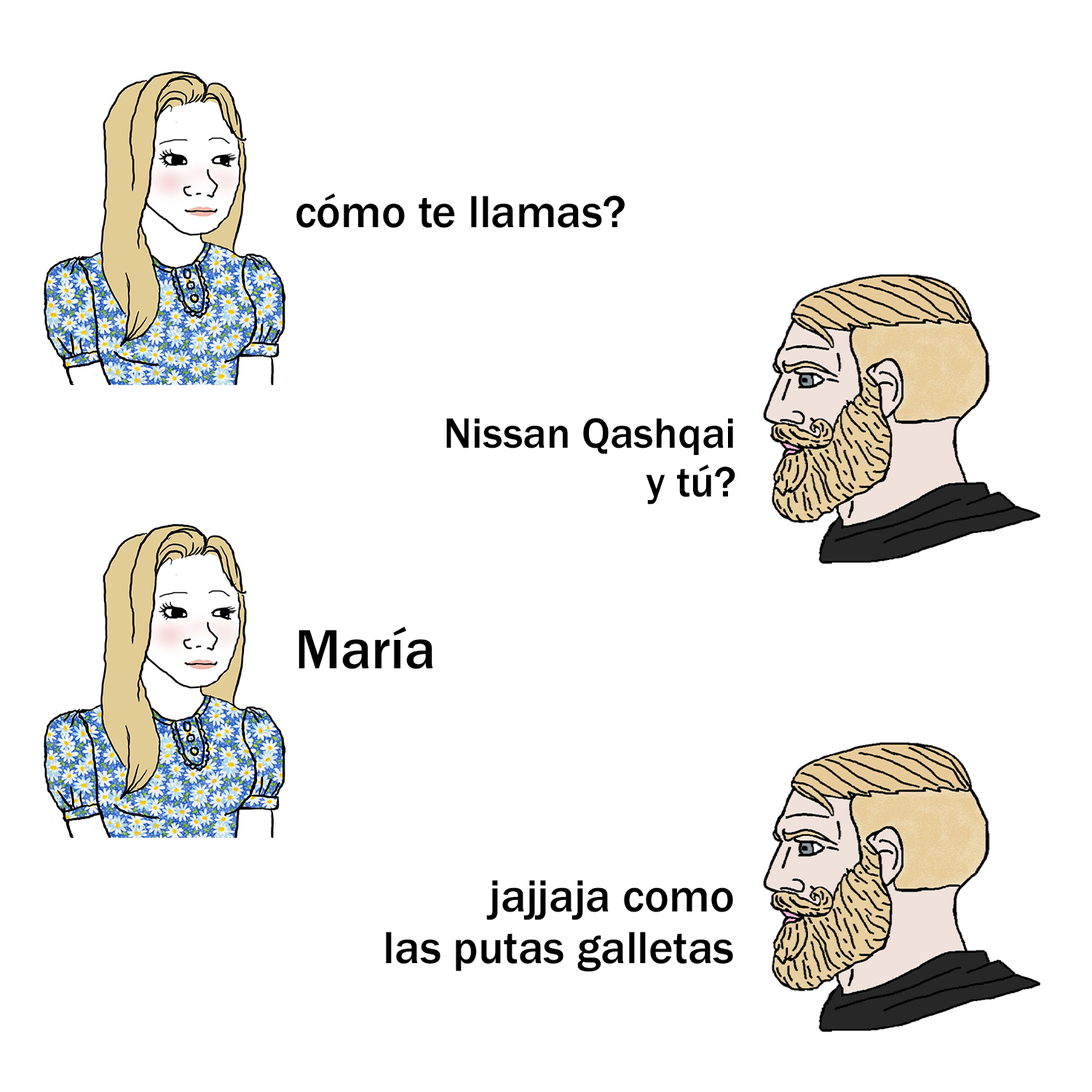
<style>
.page{position:relative;width:1092px;height:1092px;background:#ffffff}
.page>*{position:absolute;margin:0}
.t1{font:46.6px "FranklinGothic-Medium";color:#000000}
.t2{font:44.1px "FranklinGothic-Medium";color:#000000}
.t3{font:57.3px "FranklinGothic-Medium";color:#000000}
.t4{font:46.7px "FranklinGothic-Medium";color:#000000}
</style>
<div class="page">
<p class="t1" style="left:296px;top:193px;width:329px;height:35px">cómo te llamas?</p>
<p class="t2" style="left:446px;top:418px;width:289px;height:86px;text-align:right">Nissan Qashqai<br>y tú?</p>
<p class="t3" style="left:298px;top:626px;width:135px;height:43px">María</p>
<p class="t4" style="left:386px;top:880px;width:347px;height:92px;text-align:right">jajjaja como<br>las putas galletas</p>
</div>
